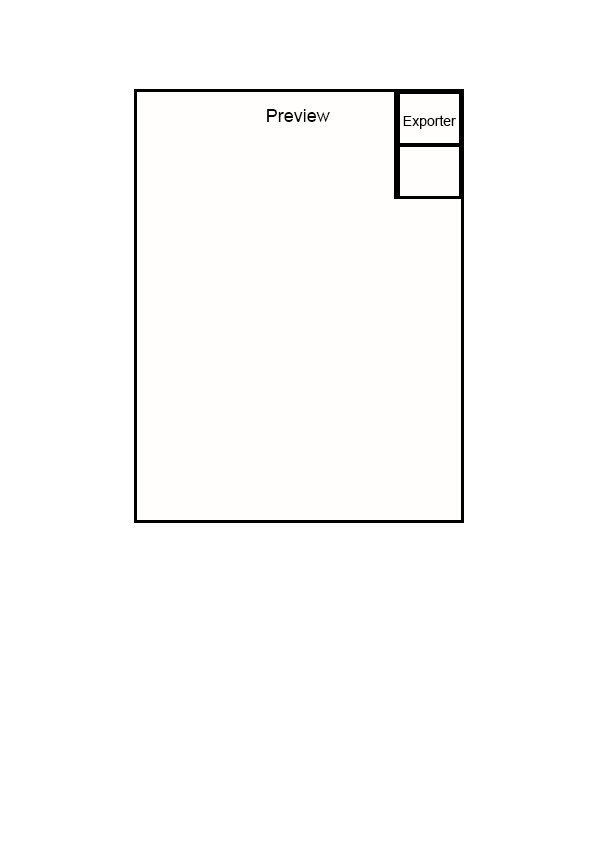
<style>
.page{position:relative;width:595px;height:842px;background:#ffffff}
.page>*{position:absolute;margin:0}
.t1{font:18px "ArialMT";color:#000000}
.t2{font:14px "ArialMT";color:#000000}
</style>
<div class="page">
<p class="t1" style="left:267px;top:109px;width:63px;height:13px">Preview</p>
<p class="t2" style="left:403px;top:115px;width:53px;height:14px">Exporter</p>
</div>
